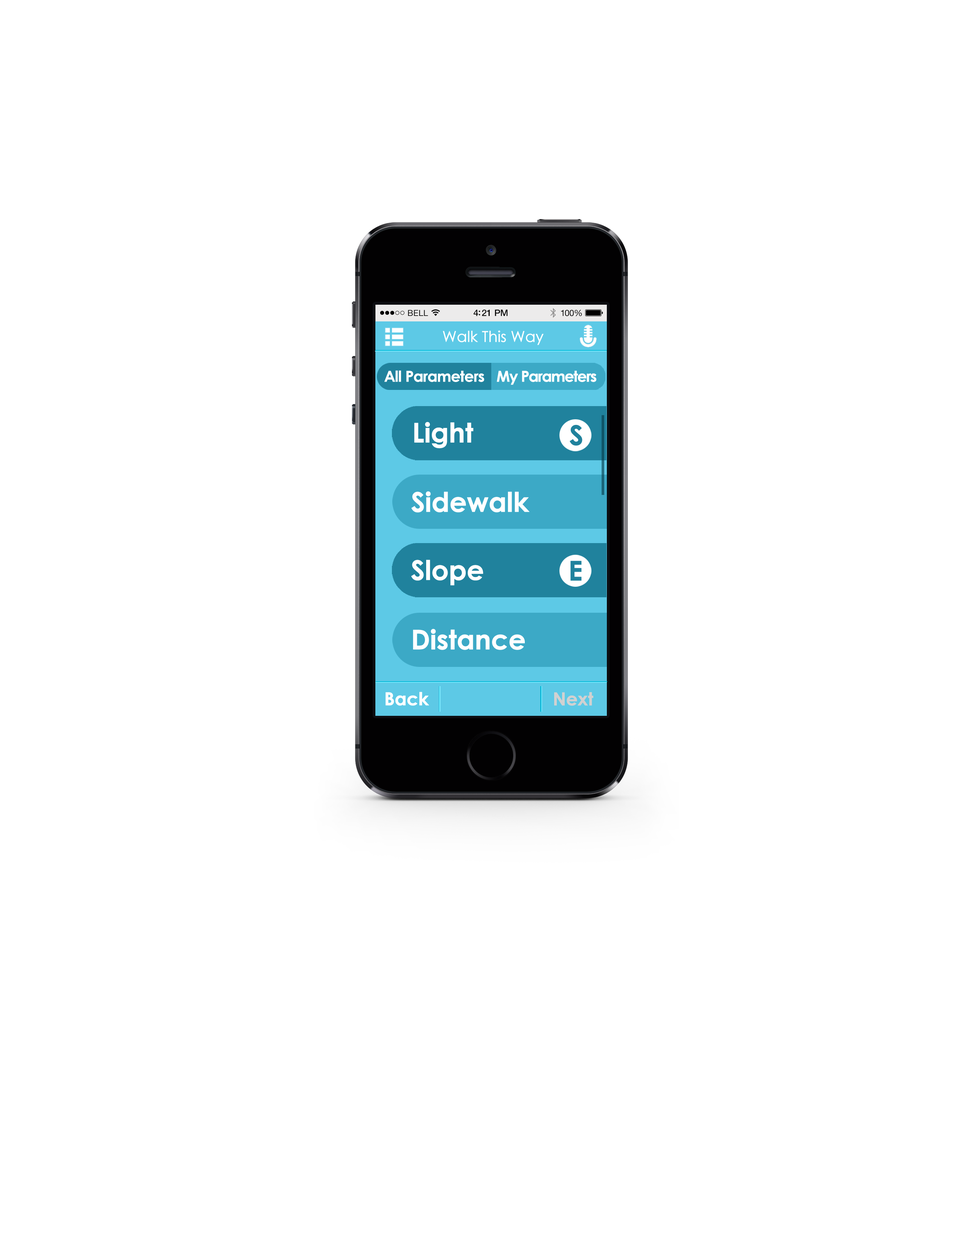
<style>
.page{position:relative;width:960px;height:1242px;background:#ffffff}
.page>*{position:absolute;margin:0}
.t1{font:15.1px "CenturyGothic";letter-spacing:-0.025em;color:#ffffff;font-weight:bold}
.t2{font:15.1px "CenturyGothic-Bold";letter-spacing:-0.05em;color:#ffffff;font-weight:bold}
.t3{font:15.1px "CenturyGothic-Bold";letter-spacing:-0.075em;color:#ffffff;font-weight:bold}
.t4{font:27.1px "CenturyGothic-Bold";letter-spacing:-0.025em;color:#ffffff;font-weight:bold}
.t5{font:27.1px "CenturyGothic-Bold";letter-spacing:-0.025em;color:#20829d;font-weight:bold}
.t6{font:18.1px "CenturyGothic-Bold";letter-spacing:-0.025em;color:#ffffff;font-weight:bold}
.t7{font:18.1px "CenturyGothic-Bold";letter-spacing:-0.025em;color:#d1d1d1;font-weight:bold}
</style>
<div class="page">
<p class="t1" style="left:443px;top:331px;width:101px;height:14px">Walk This Way</p>
<p class="t2" style="left:384px;top:370px;width:100px;height:12px">All Parameters</p>
<p class="t3" style="left:497px;top:371px;width:99px;height:14px">My Parameters</p>
<p class="t4" style="left:414px;top:422px;width:60px;height:26px">Light</p>
<p class="t5" style="left:570px;top:425px;width:12px;height:21px">S</p>
<p class="t4" style="left:411px;top:491px;width:119px;height:22px">Sidewalk</p>
<p class="t4" style="left:411px;top:560px;width:72px;height:26px">Slope</p>
<p class="t5" style="left:570px;top:561px;width:12px;height:20px">E</p>
<p class="t4" style="left:413px;top:629px;width:112px;height:21px">Distance</p>
<p class="t6" style="left:385px;top:692px;width:44px;height:14px">Back</p>
<p class="t7" style="left:554px;top:692px;width:39px;height:14px">Next</p>
</div>
